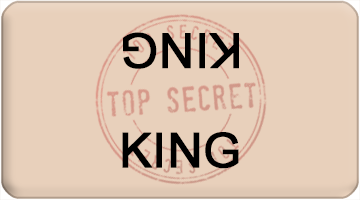
<style>
.page{position:relative;width:360px;height:200px;background:#e8d0bb}
.page>*{position:absolute;margin:0}
.t1{font:48px "ArialMT";color:#000000;font-weight:bold}
</style>
<div class="page">
<p class="t1" style="left:123px;top:32px;width:116px;height:37px;rotate:180deg">KING</p>
<p class="t1" style="left:122px;top:132px;width:117px;height:37px">KING</p>
</div>
